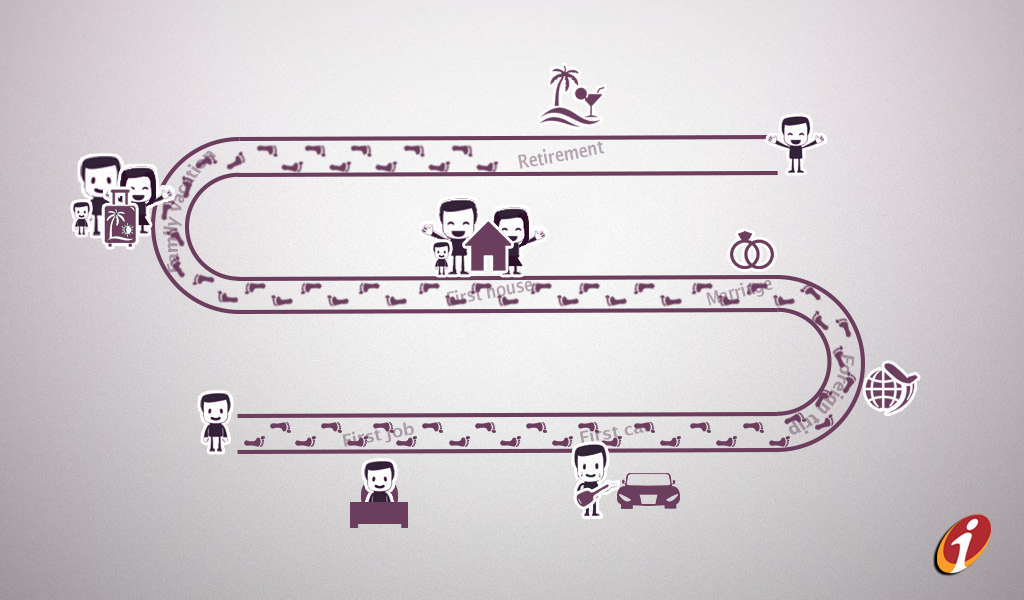
<style>
.page{position:relative;width:1024px;height:600px}
.page>*{position:absolute;margin:0}
.t1{font:18.2px "LucidaSans-Demi";letter-spacing:-0.025em;scale:0.85 1}
.t2{font:19.1px "LucidaSans-Demi";letter-spacing:-0.025em;color:#b5a5af;scale:0.84 1}
.t3{font:19.1px "LucidaSans-Demi";letter-spacing:-0.025em;color:#b3a3ae;scale:0.84 1}
.t4{font:16.7px "LucidaSans-Demi";letter-spacing:-0.025em;color:#ac9ba6;scale:1.08 1}
</style>
<div class="page">
<p class="t1" style="left:163px;top:150px;width:54px;height:123px;rotate:-74deg">Family vacation</p>
<p class="t2" style="left:518px;top:141px;width:87px;height:28px;rotate:-10deg">Retirement</p>
<p class="t3" style="left:446px;top:280px;width:88px;height:26px;rotate:-10deg">First house</p>
<p class="t1" style="left:706px;top:280px;width:67px;height:26px;rotate:-15deg">Marriage</p>
<p class="t4" style="left:579px;top:421px;width:71px;height:23px;rotate:-10deg">First car</p>
</div>
